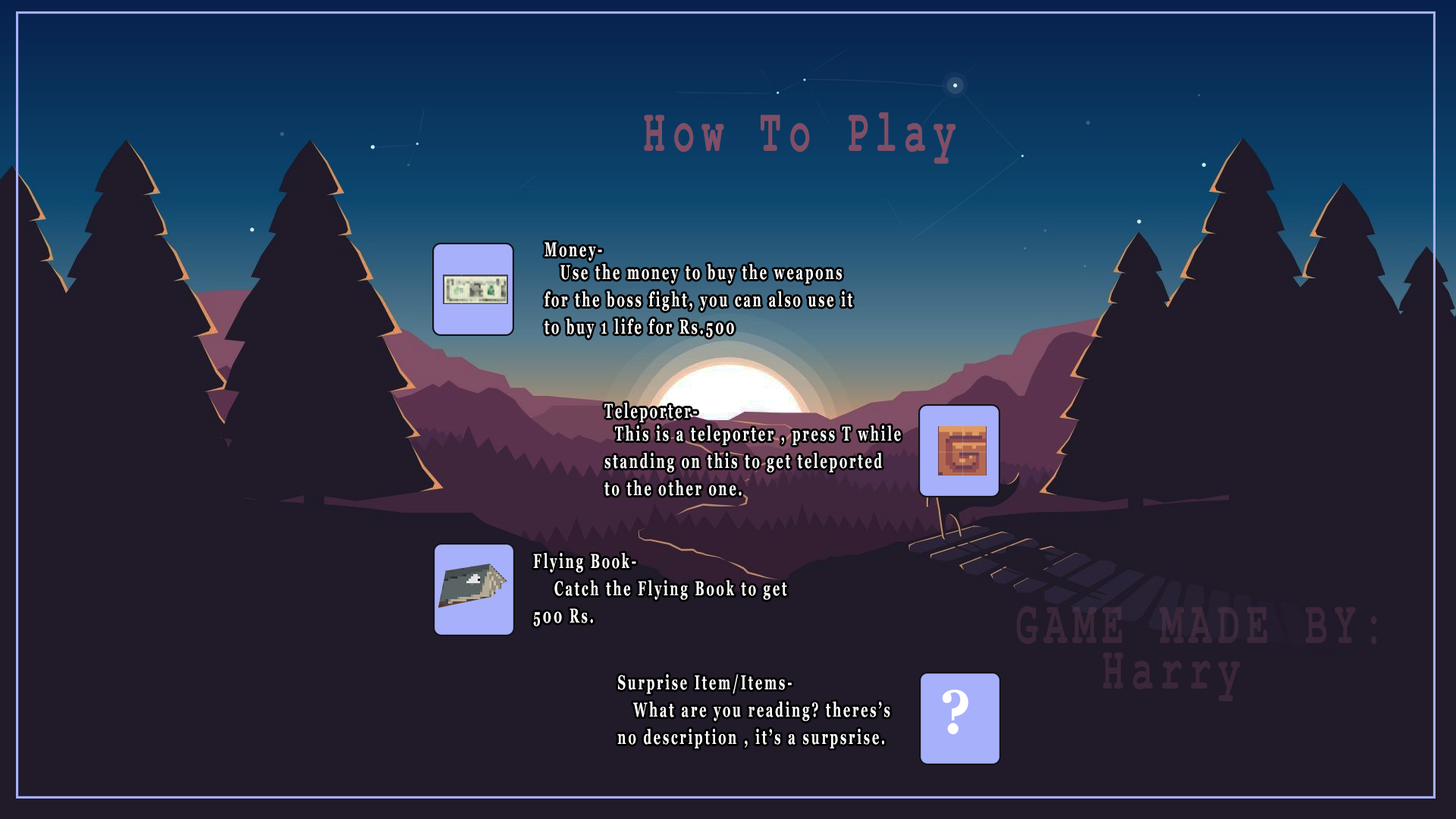
<style>
.page{position:relative;width:1456px;height:819px;background:#201a29}
.page>*{position:absolute;margin:0}
.t1{font:60.9px "CourierNewPS-BoldMT";letter-spacing:0.18em;color:#804f66;scale:0.61 1}
.t2{font:19.9px/4.5px "Georgia-Bold";letter-spacing:0.18em;color:#ffffff;scale:0.61 1}
.t3{font:60.9px/4.5px "CourierNewPS-BoldMT";letter-spacing:0.18em;color:#3a2738;scale:0.61 1}
.t4{font:61.3px "Georgia-Bold";letter-spacing:0.28em;color:#ffffff;scale:0.92 1}
</style>
<div class="page">
<p class="t1" style="left:644px;top:112px;width:312px;height:52px">How To Play</p>
<p class="t2" style="left:544px;top:242px;width:308px;height:96px;text-align:justify">Money-<br><br><br><br><br>   Use the money to buy the weapons<br><br><br><br><br><br>for the boss fight, you can also use it<br><br><br><br><br><br>to buy 1 life for Rs.500</p>
<p class="t2" style="left:604px;top:403px;width:297px;height:93px;text-align:justify">Teleporter-<br><br><br><br><br>  This is a teleporter , press T while<br><br><br><br><br><br>standing on this to get teleported<br><br><br><br><br><br>to the other one.</p>
<p class="t2" style="left:533px;top:553px;width:254px;height:73px;text-align:justify">Flying Book-<br><br><br><br><br><br>    Catch the Flying Book to get <br><br><br><br><br><br>500 Rs.</p>
<p class="t3" style="left:1016px;top:606px;width:361px;height:95px;text-align:justify">GAME MADE BY:<br><br><br><br><br><br><br><br><br><br>   Harry</p>
<p class="t2" style="left:617px;top:674px;width:273px;height:74px;text-align:justify">Surprise Item/Items-<br><br><br><br><br><br>   What are you reading? theres’s <br><br><br><br><br><br>no description , it’s a surpsrise.</p>
<p class="t4" style="left:942px;top:689px;width:26px;height:46px">?</p>
</div>
